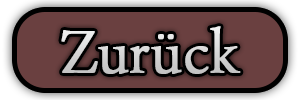
<style>
.page{position:relative;width:300px;height:100px;background:#6a4040}
.page>*{position:absolute;margin:0}
.t1{font:66.7px "ArnoPro-LightDisplay";color:#d0d0d0;font-weight:bold}
</style>
<div class="page">
<p class="t1" style="left:61px;top:26px;width:180px;height:48px">Zurück</p>
</div>
